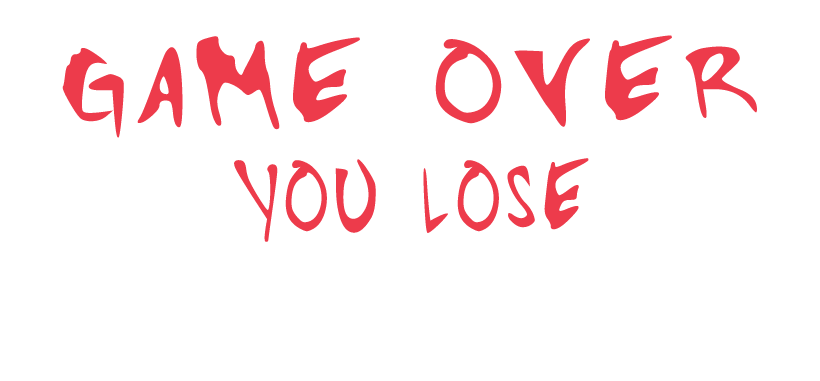
<style>
.page{position:relative;width:820px;height:381px;background:#ffffff}
.page>*{position:absolute;margin:0}
.t1{font:179px "Bustamantefont";color:#ed3b4b;scale:1.33 1}
.t2{font:150.9px "Bustamantefont";color:#ed3b4b}
</style>
<div class="page">
<p class="t1" style="left:62px;top:35px;width:695px;height:103px">GAME OVER</p>
<p class="t2" style="left:234px;top:158px;width:355px;height:84px">YOU LOSE</p>
</div>
